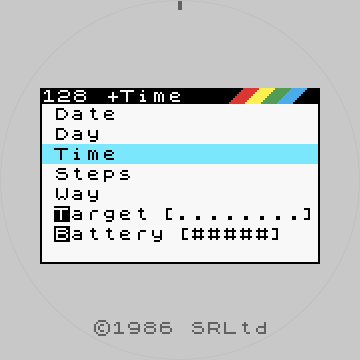
<style>
.page{position:relative;width:360px;height:360px;background:#c8c8c8}
.page>*{position:absolute;margin:0}
.t1{font:24px "ZX-Spectrum";color:#f8f8f8}
.t2{font:24px "ZX-Spectrum";color:#000000}
.t3{font:24px "ZX-Spectrum";color:#616161}
</style>
<div class="page">
<p class="t1" style="left:44px;top:90px;width:136px;height:12px">128 +Time</p>
<p class="t2" style="left:56px;top:108px;width:58px;height:12px">Date</p>
<p class="t2" style="left:56px;top:128px;width:42px;height:14px">Day</p>
<p class="t2" style="left:54px;top:148px;width:60px;height:12px">Time</p>
<p class="t2" style="left:56px;top:168px;width:74px;height:14px">Steps</p>
<p class="t2" style="left:56px;top:188px;width:42px;height:14px">Way</p>
<p class="t2" style="left:54px;top:208px;width:92px;height:14px">Target</p>
<p class="t2" style="left:166px;top:208px;width:144px;height:12px">[........]</p>
<p class="t2" style="left:56px;top:228px;width:106px;height:14px">Battery</p>
<p class="t2" style="left:182px;top:228px;width:96px;height:12px">[#####]</p>
<p class="t3" style="left:94px;top:320px;width:172px;height:16px">©1986 SRLtd</p>
</div>
